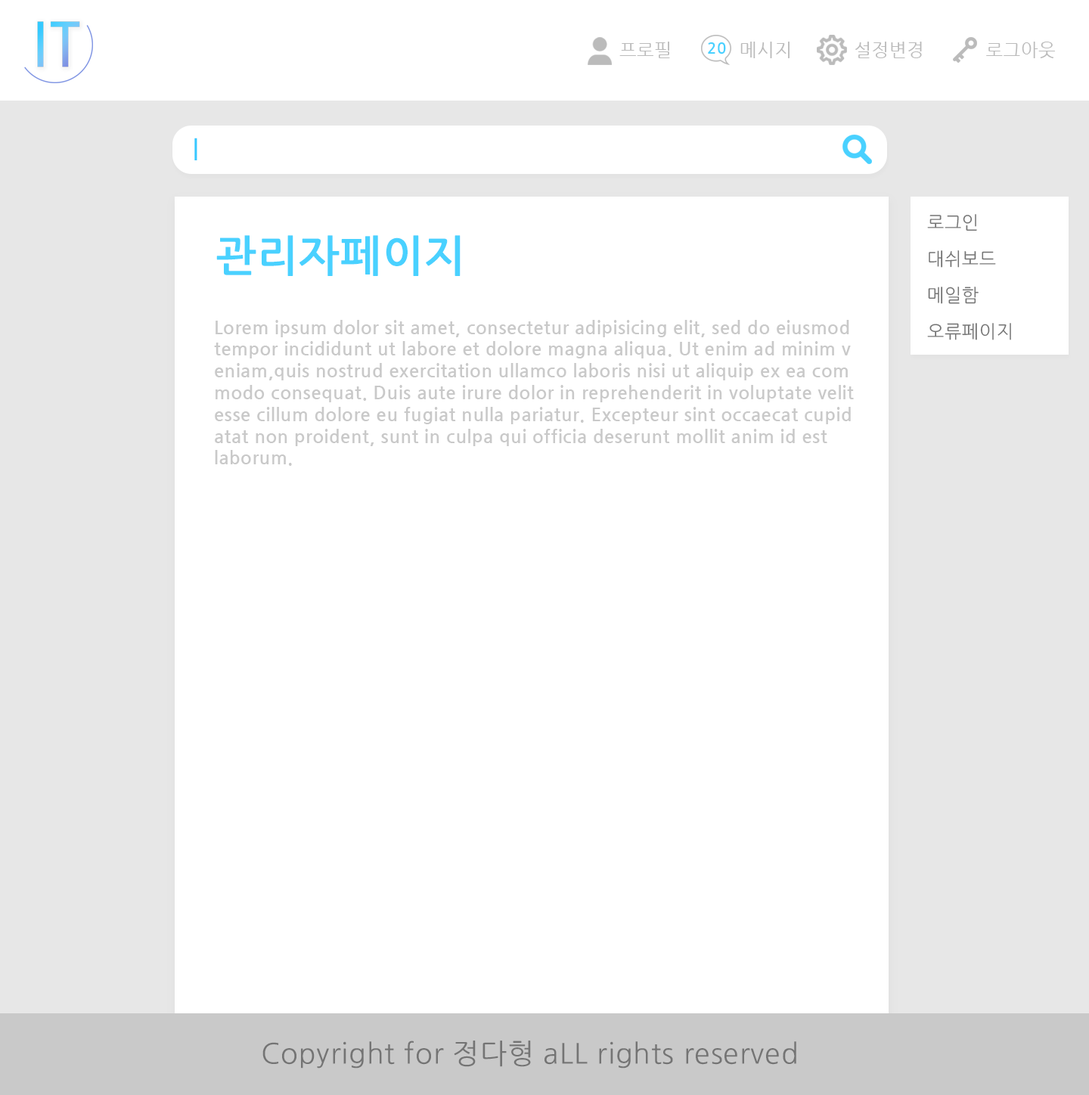
<style>
.page{position:relative;width:1089px;height:1095px;background:#ffffff}
.page>*{position:absolute;margin:0}
.t1{font:18.1px "NanumGothic";letter-spacing:0.025em;color:#bbbbbb}
.t2{font:15px "NanumGothicBold";letter-spacing:0.025em;color:#49d1ff;scale:1.04 1}
.t3{font:24px "NanumGothicBold";letter-spacing:0.025em;color:#37c9ff;scale:0.94 1}
.t4{font:18.1px/36.3px "NanumGothic";letter-spacing:0.025em;color:#747474}
.t5{font:42.8px "NanumGothicBold";letter-spacing:0.025em;color:#49d1ff}
.t6{font:18.1px "NanumGothicBold";letter-spacing:0.025em;color:#c9c9c9}
.t7{font:28px "NanumGothic";letter-spacing:0.025em;color:#747474}
</style>
<div class="page">
<p class="t1" style="left:619px;top:42px;width:51px;height:16px">프로필</p>
<p class="t1" style="left:740px;top:42px;width:49px;height:16px">메시지</p>
<p class="t1" style="left:855px;top:42px;width:67px;height:16px">설정변경</p>
<p class="t1" style="left:986px;top:42px;width:69px;height:16px">로그아웃</p>
<p class="t2" style="left:708px;top:42px;width:18px;height:12px">20</p>
<p class="t3" style="left:194px;top:138px;width:3px;height:22px">|</p>
<p class="t4" style="left:927px;top:214px;width:84px;height:126px">로그인<br>대쉬보드<br>메일함<br>오류페이지</p>
<p class="t5" style="left:216px;top:235px;width:245px;height:41px">관리자페이지</p>
<p class="t6" style="left:214px;top:320px;width:640px;height:146px">Lorem ipsum dolor sit amet, consectetur adipisicing elit, sed do eiusmod<br>tempor incididunt ut labore et dolore magna aliqua. Ut enim ad minim v<br>eniam,quis nostrud exercitation ullamco laboris nisi ut aliquip ex ea com<br>modo consequat. Duis aute irure dolor in reprehenderit in voluptate velit<br>esse cillum dolore eu fugiat nulla pariatur. Excepteur sint occaecat cupid<br>atat non proident, sunt in culpa qui officia deserunt mollit anim id est <br>laborum.</p>
<p class="t7" style="left:262px;top:1041px;width:534px;height:28px">Copyright for 정다형 aLL rights reserved</p>
</div>
